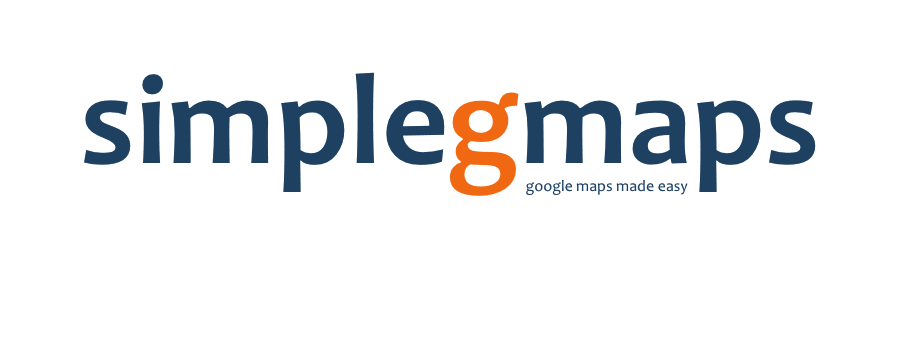
<style>
.page{position:relative;width:900px;height:341px;background:#ffffff}
.page>*{position:absolute;margin:0}
.t1{font:130px "Candara-Bold";color:#1e4162}
.t2{font:130px "Candara-Bold";color:#f06812}
.t3{font:16px "Candara";color:#1e4162}
</style>
<div class="page">
<p class="t1" style="left:84px;top:72px;width:732px;height:124px">simple<span class="t2">g</span>maps</p>
<p class="t3" style="left:526px;top:180px;width:162px;height:15px">google maps made easy</p>
</div>
